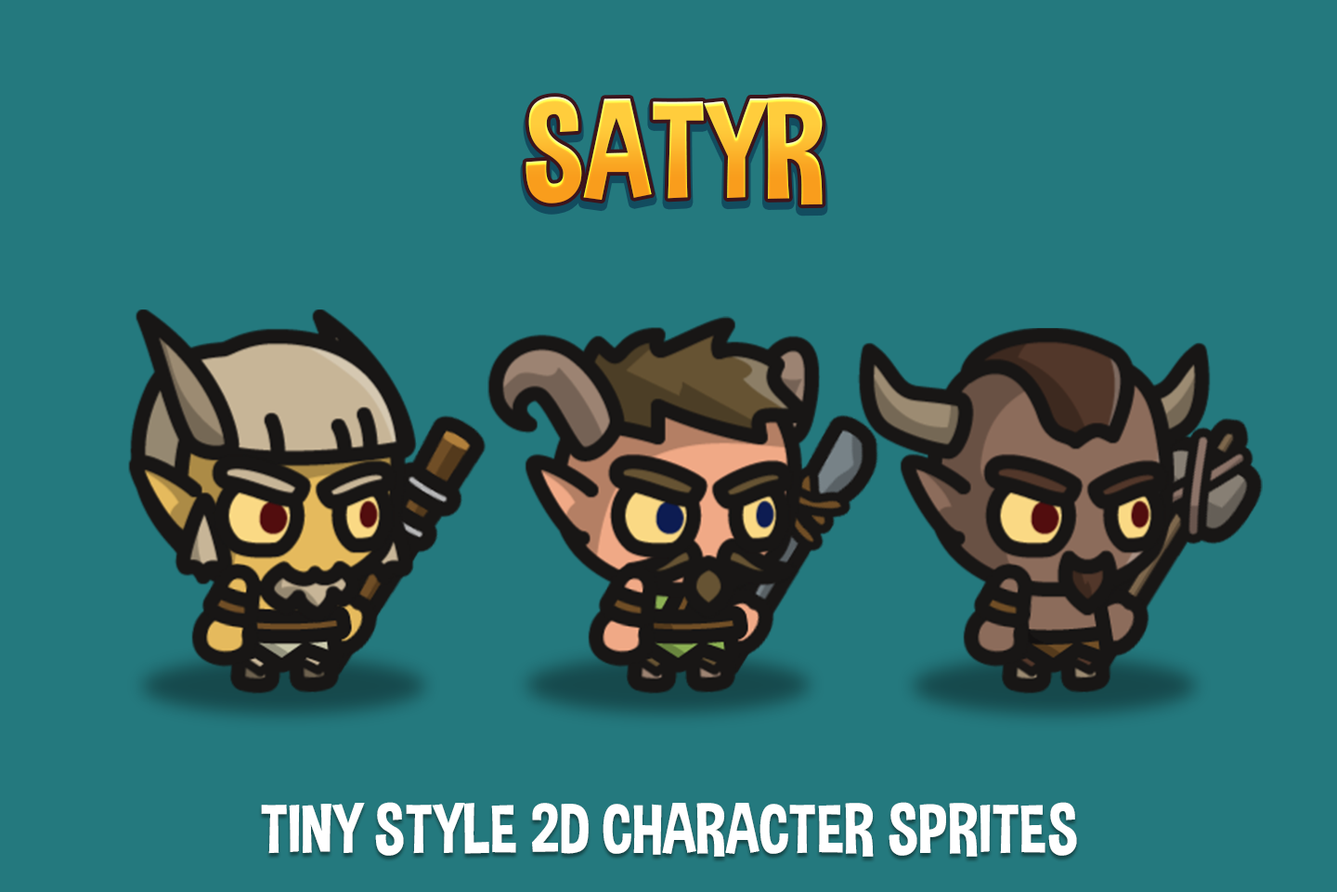
<style>
.page{position:relative;width:1337px;height:892px;background:#24797e}
.page>*{position:absolute;margin:0}
.t1{font:139.3px "DimboRegular";text-transform:uppercase}
.t2{font:69.7px "DimboRegular";color:#ffffff;text-transform:uppercase}
</style>
<div class="page">
<p class="t1" style="left:526px;top:97px;width:297px;height:108px">SATYR</p>
<p class="t2" style="left:261px;top:802px;width:816px;height:54px">Tiny Style 2D Character Sprites</p>
</div>
